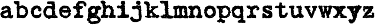
<style>
.page{position:relative;width:375px;height:25px;background:#ffffff}
.page>*{position:absolute;margin:0}
.t1{font:24px "GabrieleBlackRibbonFG";color:#000000}
</style>
<div class="page">
<p class="t1" style="left:0px;top:0px;width:375px;height:25px">abcdefghijklmnopqrstuvwxyz</p>
</div>
